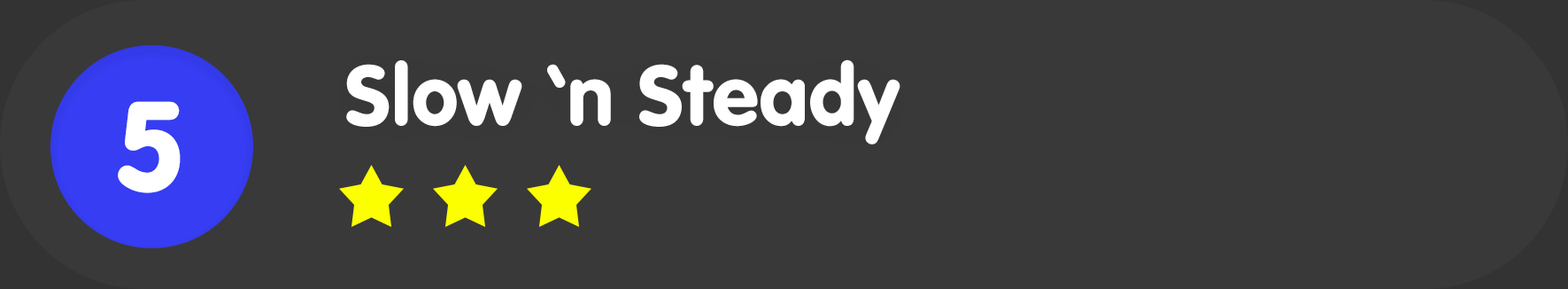
<style>
.page{position:relative;width:1568px;height:289px;background:#393939}
.page>*{position:absolute;margin:0}
.t1{font:88.5px "VAGRundschriftD";color:#ffffff}
.t2{font:132.8px "VAGRundschriftD";color:#ffffff}
</style>
<div class="page">
<p class="t1" style="left:346px;top:59px;width:554px;height:85px">Slow ‘n Steady</p>
<p class="t2" style="left:118px;top:101px;width:63px;height:92px">5</p>
</div>
